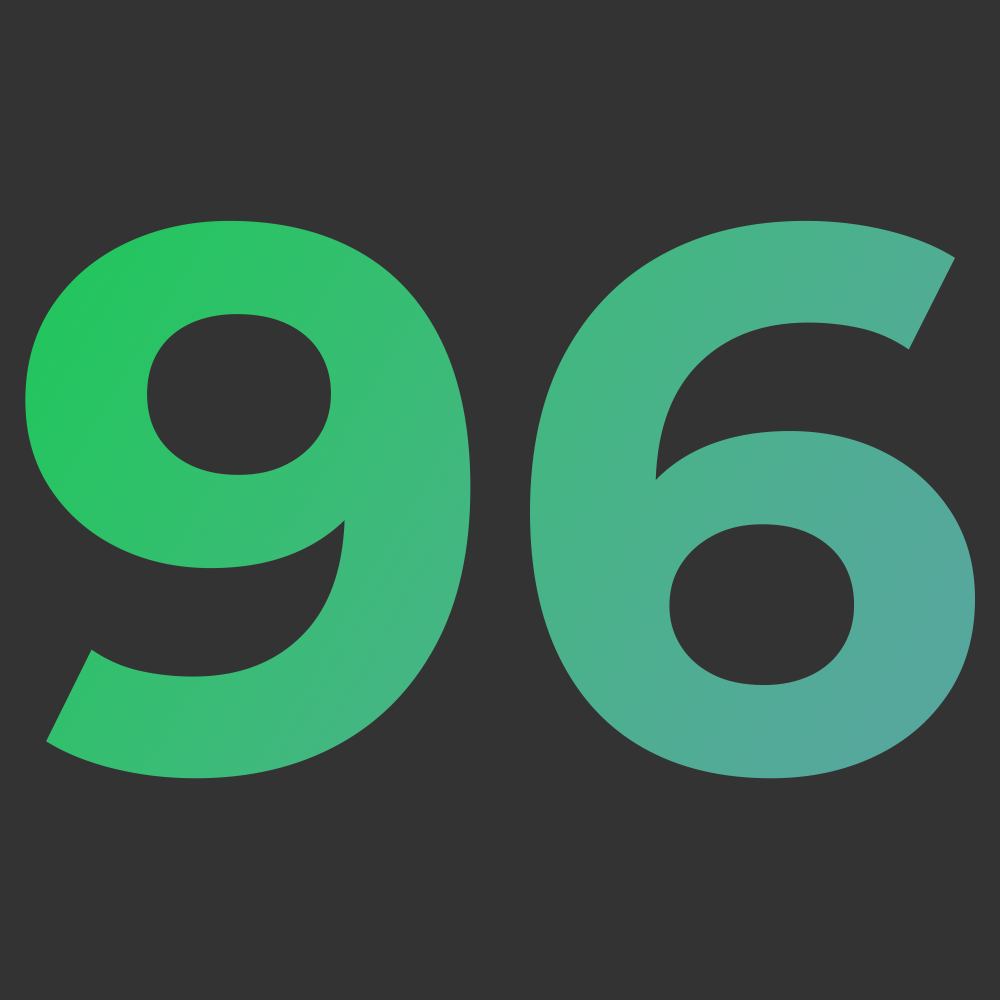
<style>
.page{position:relative;width:1000px;height:1000px;background:#333333}
.page>*{position:absolute;margin:0}
.t1{font:769.8px "MontserratRoman-Bold"}
</style>
<div class="page">
<p class="t1" style="left:25px;top:220px;width:950px;height:559px">96</p>
</div>
